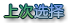
<style>
.page{position:relative;width:68px;height:23px;background:#ffffff}
.page>*{position:absolute;margin:0}
.t1{font:14px "MicrosoftYaHeiUI";letter-spacing:0.05em;font-weight:bold}
</style>
<div class="page">
<p class="t1" style="left:4px;top:4px;width:30px;height:15px">上次</p>
<p class="t1" style="left:34px;top:4px;width:30px;height:14px">选择</p>
</div>
